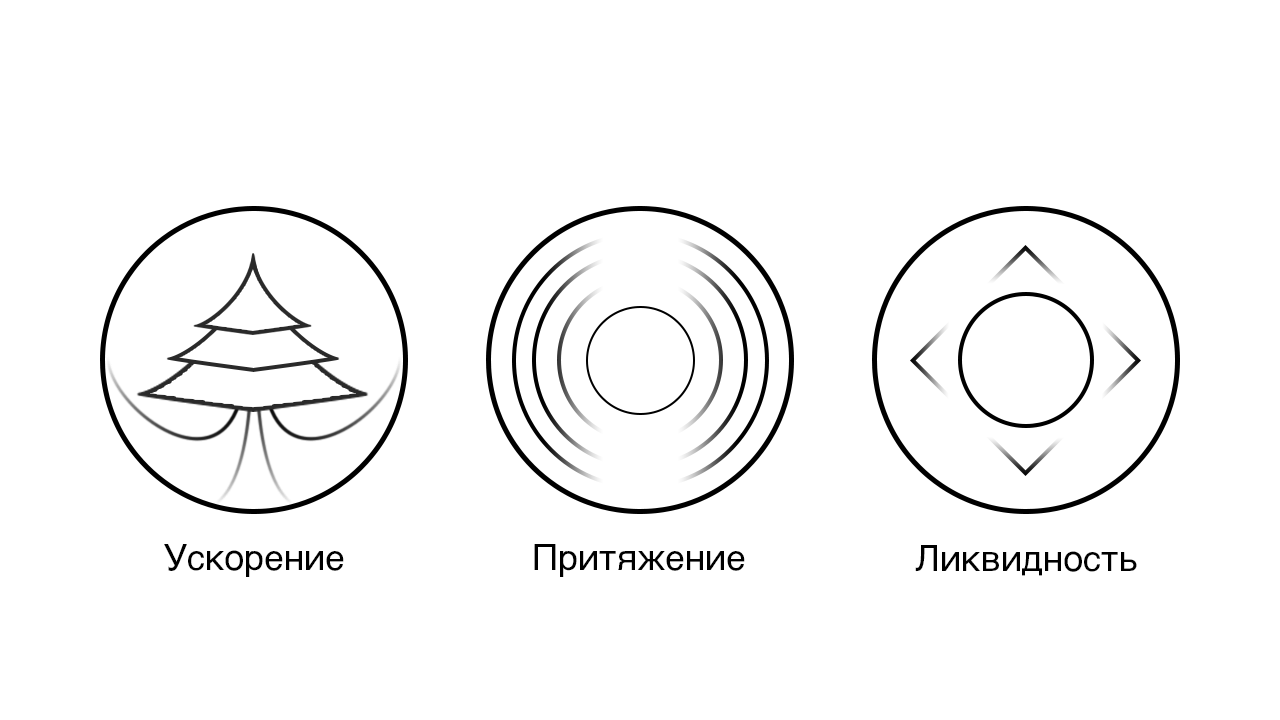
<style>
.page{position:relative;width:1280px;height:720px;background:#ffffff}
.page>*{position:absolute;margin:0}
.t1{font:36px "Helvetica-Regular";color:#000000}
</style>
<div class="page">
<p class="t1" style="left:164px;top:544px;width:180px;height:33px">Ускорение</p>
<p class="t1" style="left:534px;top:544px;width:211px;height:33px">Притяжение</p>
<p class="t1" style="left:915px;top:545px;width:222px;height:31px">Ликвидность</p>
</div>
